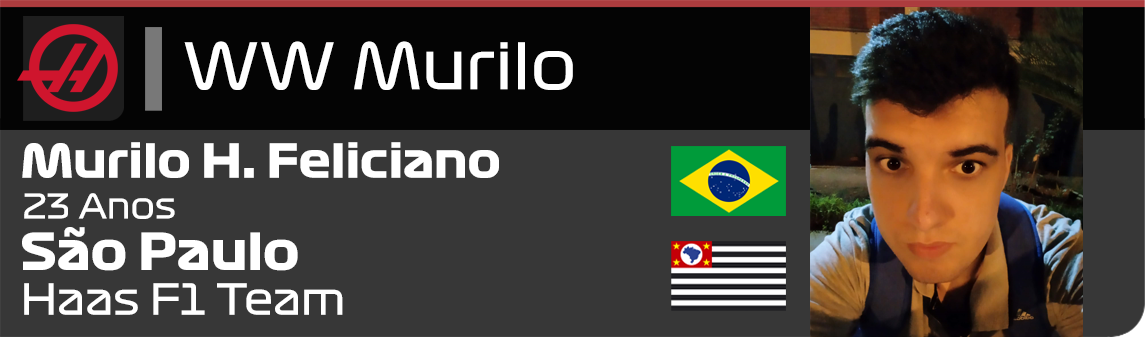
<style>
.page{position:relative;width:1145px;height:337px;background:#373737}
.page>*{position:absolute;margin:0}
.t1{font:62.5px "Formula1-Display-Regular";letter-spacing:-0.007em;color:#ffffff}
.t2{font:45.8px "Formula1-Display-Bold";letter-spacing:-0.007em;color:#ffffff}
.t3{font:33.3px "Formula1-Display-Regular";letter-spacing:-0.007em;color:#ffffff}
.t4{font:50px "Formula1-Display-Bold";letter-spacing:-0.007em;color:#ffffff}
.t5{font:41.7px "Formula1-Display-Regular";letter-spacing:-0.007em;color:#ffffff}
</style>
<div class="page">
<p class="t1" style="left:184px;top:41px;width:389px;height:49px">WW Murilo</p>
<p class="t2" style="left:22px;top:142px;width:477px;height:36px">Murilo H. Feliciano</p>
<p class="t3" style="left:24px;top:193px;width:151px;height:26px">23 Anos</p>
<p class="t4" style="left:22px;top:227px;width:276px;height:44px">São Paulo</p>
<p class="t5" style="left:24px;top:283px;width:319px;height:32px">Haas F1 Team</p>
</div>
